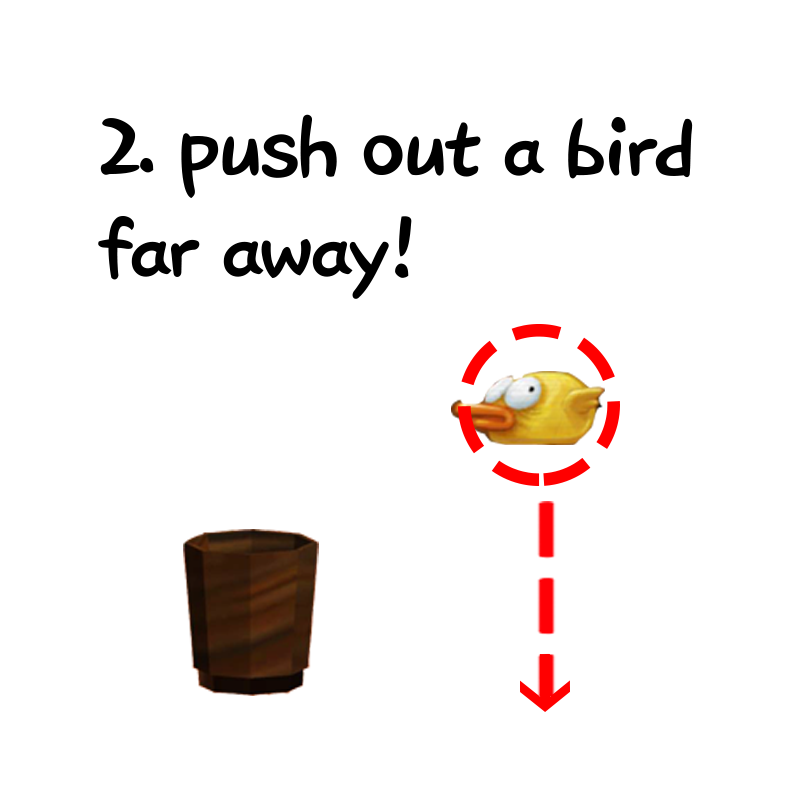
<style>
.page{position:relative;width:800px;height:800px;background:#ffffff}
.page>*{position:absolute;margin:0}
.t1{font:99.7px/100.7px "DXHgrmB-KSCpc-EUC-H";letter-spacing:-0.025em;color:#000000}
</style>
<div class="page">
<p class="t1" style="left:98px;top:114px;width:595px;height:185px">2. push out a bird <br>far away!</p>
</div>
